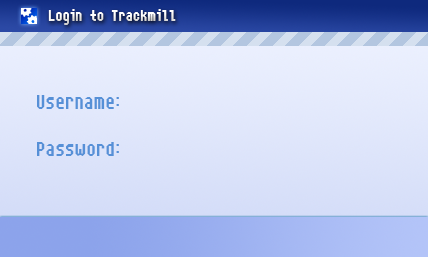
<style>
.page{position:relative;width:428px;height:257px}
.page>*{position:absolute;margin:0}
.t1{font:18px "NarrowRectangle-7";color:#ffffff}
.t2{font:24px "NarrowRectangle-7";color:#5690d7}
</style>
<div class="page">
<p class="t1" style="left:48px;top:9px;width:128px;height:16px">Login to Trackmill</p>
<p class="t2" style="left:37px;top:95px;width:82px;height:14px">Username:</p>
<p class="t2" style="left:37px;top:142px;width:82px;height:14px">Password:</p>
</div>
